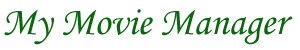
<style>
.page{position:relative;width:300px;height:50px;background:#ffffff}
.page>*{position:absolute;margin:0}
.t1{font:40px "MonotypeCorsiva";color:#09680b}
</style>
<div class="page">
<p class="t1" style="left:4px;top:9px;width:289px;height:36px">My Movie Manager</p>
</div>
